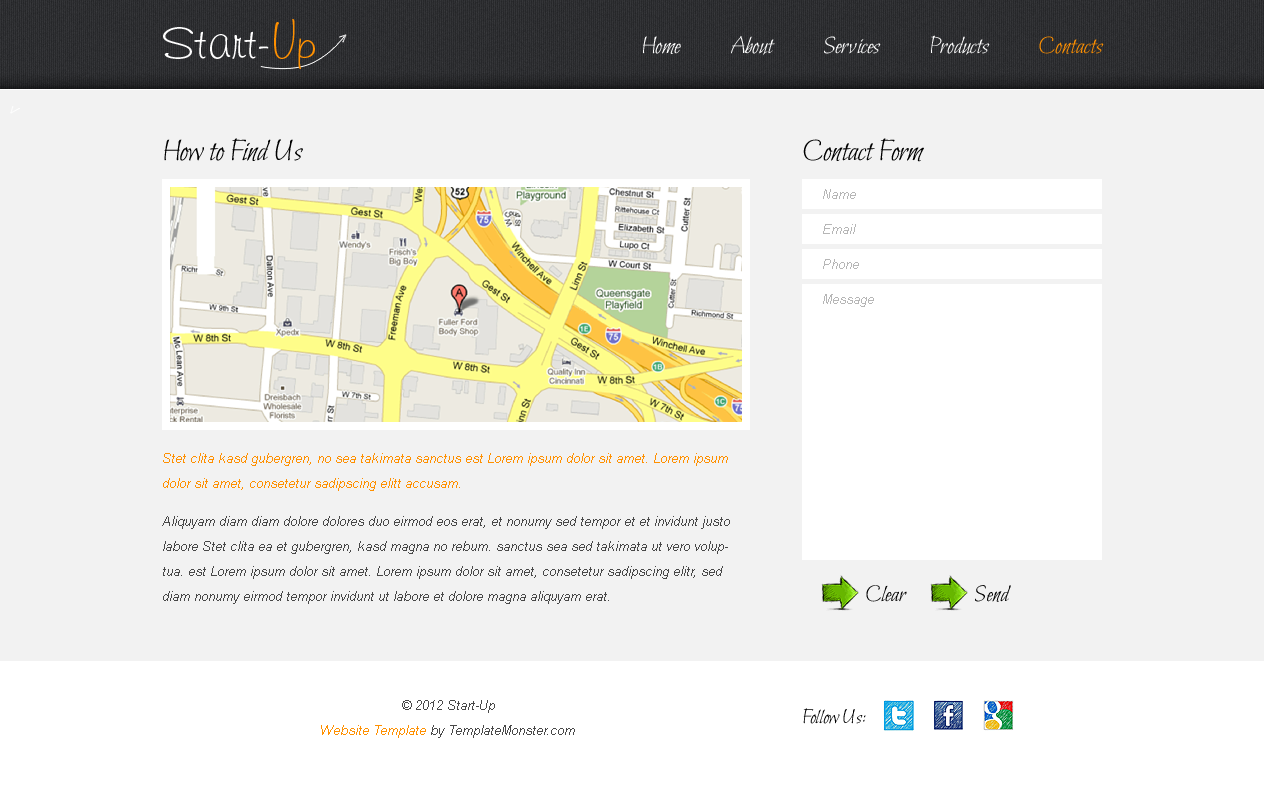
<style>
.page{position:relative;width:1264px;height:785px;background:#f2f2f2}
.page>*{position:absolute;margin:0}
.t1{font:50px "Freehand591BT-RegularA";color:#ffffff}
.t2{font:50px "Freehand591BT-RegularA";color:#ff9000}
.t3{font:25px "Bilbo-Regular";color:#ffffff}
.t4{font:25px "Bilbo-Regular";color:#ff9000}
.t5{font:31px "Bilbo-Regular";color:#000000}
.t6{font:13px/35px "Arial-ItalicMT";color:#b6b6b6}
.t7{font:13px/25px "Arial-ItalicMT";color:#484848}
.t8{font:13px/38px "Arial-ItalicMT";color:#ff9000}
.t9{font:13px/25px "Arial-ItalicMT";color:#ff9000}
.t10{font:13px/38px "Arial-ItalicMT";color:#484848}
.t11{font:24px "Bilbo-Regular";color:#000000}
.t12{font:21px "Bilbo-Regular";color:#000000}
</style>
<div class="page">
<p class="t1" style="left:163px;top:19px;width:152px;height:50px">Start-<span class="t2">Up</span></p>
<p class="t3" style="left:643px;top:35px;width:461px;height:20px">Home          About          Services          Products          <span class="t4">Contacts</span></p>
<p class="t5" style="left:164px;top:138px;width:139px;height:23px">How to Find Us</p>
<p class="t5" style="left:803px;top:138px;width:121px;height:24px">Contact Form</p>
<p class="t6" style="left:823px;top:189px;width:51px;height:118px">Name<br>Email<br>Phone<br>Message</p>
<p class="t7" style="left:162px;top:453px;width:568px;height:151px"><span class="t8">S</span><span class="t9">tet clita kasd gubergren, no sea takimata sanctus est Lorem ipsum dolor sit amet. Lorem ipsum dolor sit amet, consetetur sadipscing elitt accusam.<br></span><span class="t10">A</span>liquyam diam diam dolore dolores duo eirmod eos erat, et nonumy sed tempor et et invidunt justo labore Stet clita ea et gubergren, kasd magna no rebum. sanctus sea sed takimata ut vero voluptua. est Lorem ipsum dolor sit amet. Lorem ipsum dolor sit amet, consetetur sadipscing elitr, sed diam nonumy eirmod tempor invidunt ut labore et dolore magna aliquyam erat.</p>
<p class="t11" style="left:866px;top:585px;width:41px;height:17px">Clear</p>
<p class="t11" style="left:975px;top:585px;width:36px;height:17px">Send</p>
<p class="t7" style="left:321px;top:700px;width:254px;height:38px;text-align:center">© 2012 Start-Up<br><span class="t9">Website Template</span> by TemplateMonster.com</p>
<p class="t12" style="left:803px;top:708px;width:63px;height:16px">Follow Us:</p>
</div>
